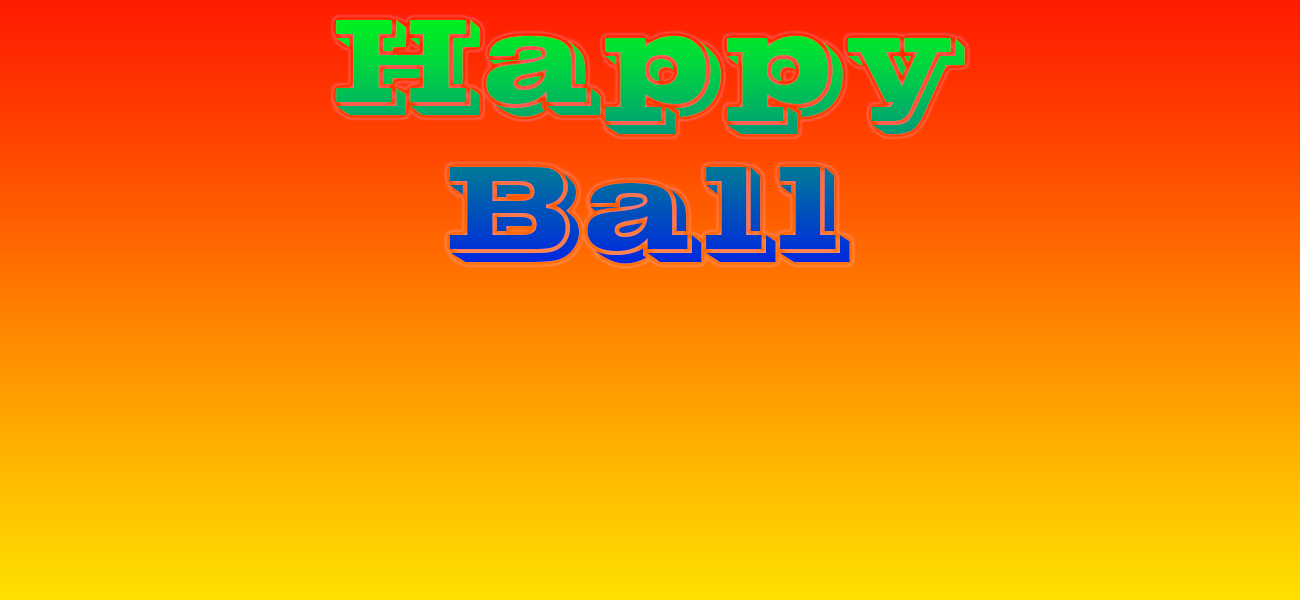
<style>
.page{position:relative;width:1300px;height:600px}
.page>*{position:absolute;margin:0}
.t1{font:122.2px "VinetaBT-Regular"}
</style>
<div class="page">
<p class="t1" style="left:336px;top:20px;width:629px;height:244px;text-align:center">Happy Ball</p>
</div>
